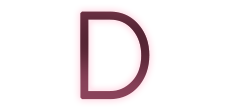
<style>
.page{position:relative;width:229px;height:111px;background:#ffffff}
.page>*{position:absolute;margin:0}
.t1{font:118px "GeosansLight";font-weight:bold}
</style>
<div class="page">
<p class="t1" style="left:80px;top:11px;width:70px;height:89px">D</p>
</div>
